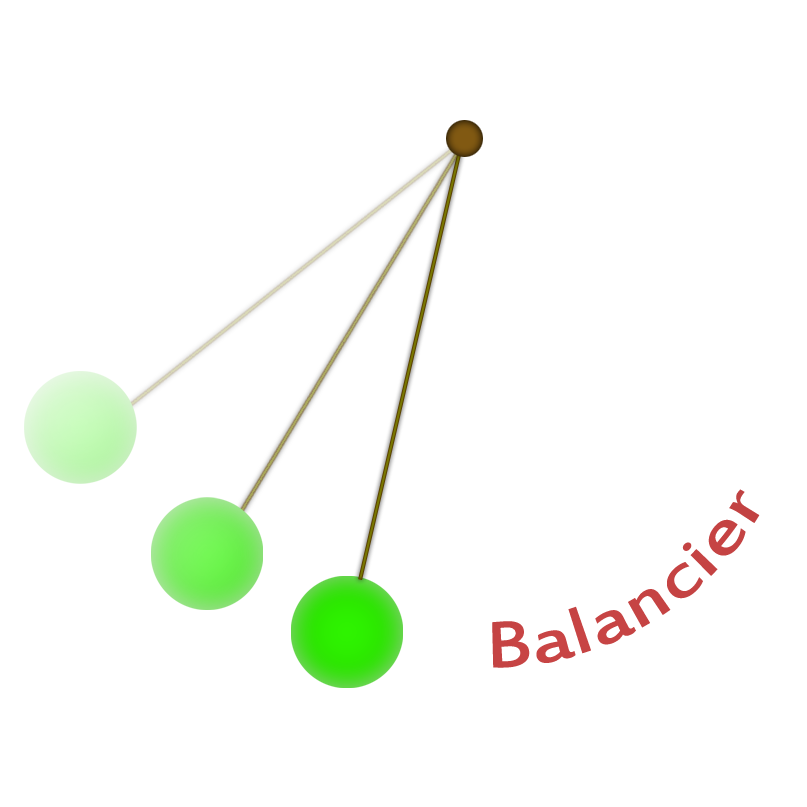
<style>
.page{position:relative;width:807px;height:807px;background:#ffffff}
.page>*{position:absolute;margin:0}
.t1{font:72px "EstrangeloEdessa";color:#c64444}
</style>
<div class="page">
<p class="t1" style="left:492px;top:489px;width:268px;height:179px;rotate:-31deg">Balancier</p>
</div>
